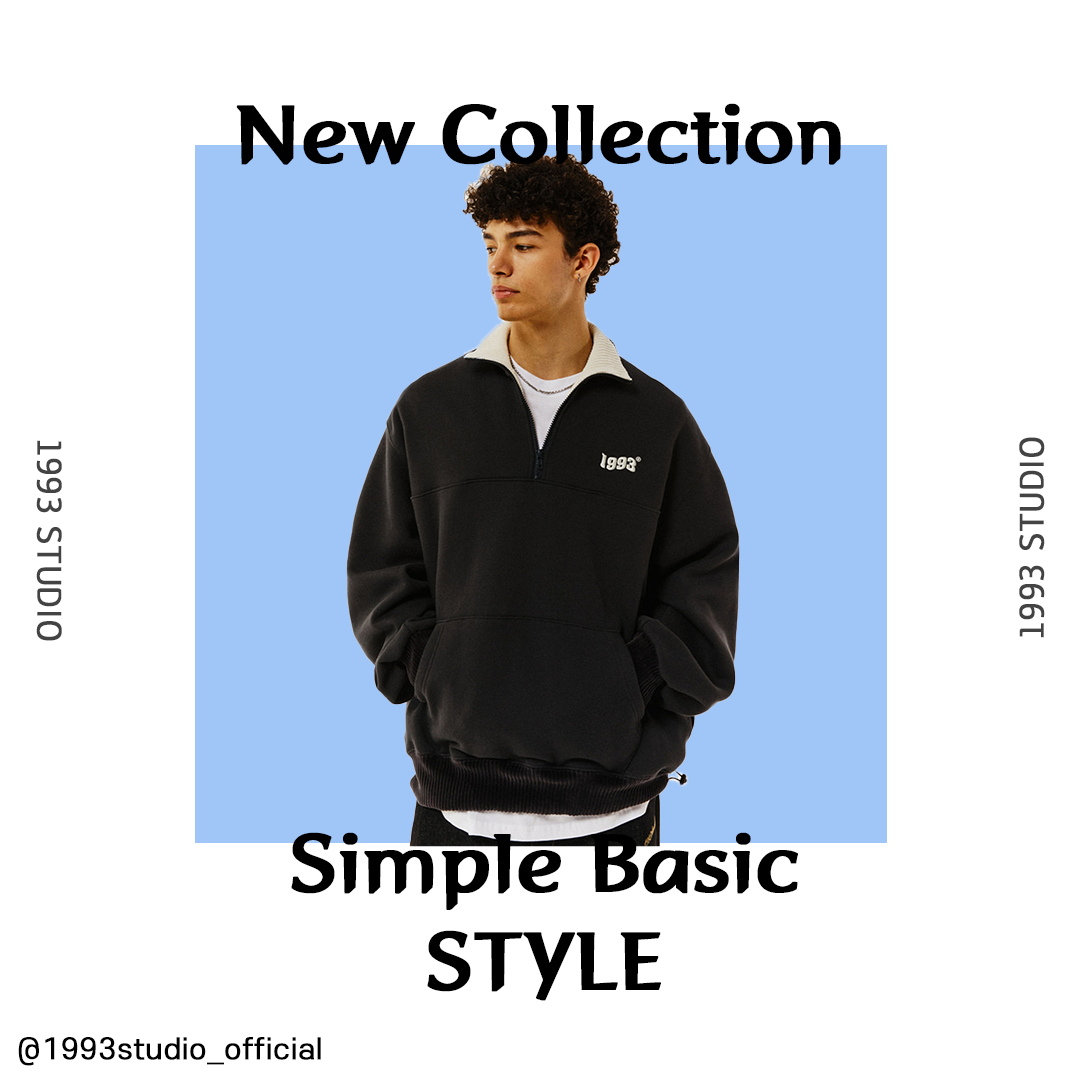
<style>
.page{position:relative;width:1080px;height:1080px;background:#ffffff}
.page>*{position:absolute;margin:0}
.t1{font:83.3px "TSTJJWanSunB";letter-spacing:0.005em;color:#000000;font-weight:bold;scale:1.05 1}
.t2{font:33.3px "GyeonggiTitleL";letter-spacing:0.005em;color:#434343;font-weight:bold;scale:1.05 1}
.t3{font:33.3px/133.3px "GyeonggiTitleL";letter-spacing:0.005em;color:#434343;font-weight:bold;scale:1.05 1}
.t4{font:83.3px/97.2px "TSTJJWanSunB";letter-spacing:0.005em;color:#000000;font-weight:bold;scale:1.05 1}
.t5{font:27.8px "S-CoreDream-4Regular";letter-spacing:0.005em;color:#000000;font-weight:bold;scale:1.05 1}
</style>
<div class="page">
<p class="t1" style="left:236px;top:103px;width:605px;height:62px">New Collection</p>
<p class="t2" style="left:1019px;top:437px;width:26px;height:201px;rotate:180deg">1993 STUDIO</p>
<p class="t3" style="left:36px;top:440px;width:26px;height:201px;text-align:center">1993 STUDIO</p>
<p class="t4" style="left:291px;top:832px;width:507px;height:169px;text-align:center">Simple Basic<br>STYLE</p>
<p class="t5" style="left:18px;top:1037px;width:303px;height:29px">@1993studio_official</p>
</div>
